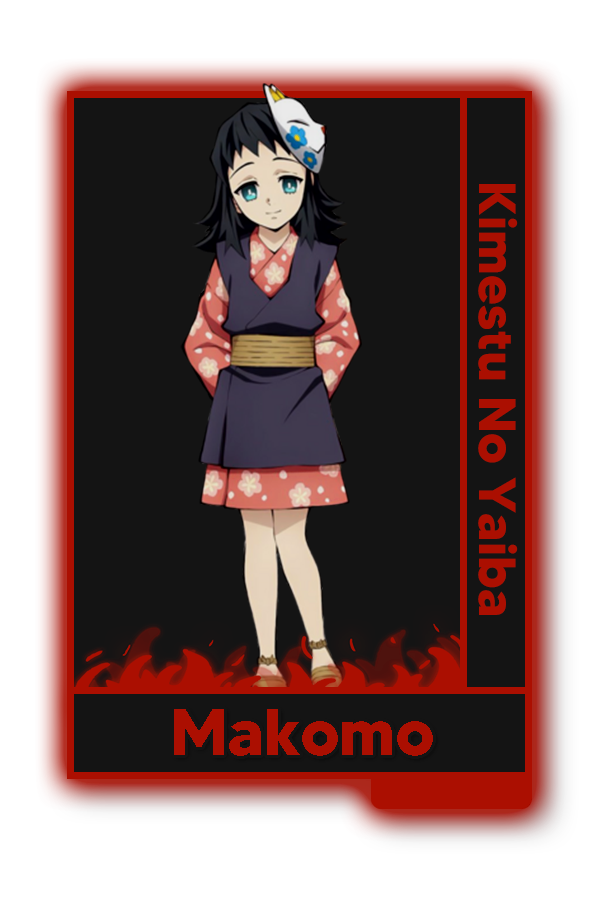
<style>
.page{position:relative;width:600px;height:900px;background:#141414}
.page>*{position:absolute;margin:0}
.t1{font:52px "MADETOMMY-Bold";color:#ab0f01}
.t2{font:65.2px "MADETOMMY-Bold";color:#ab0f01}
</style>
<div class="page">
<p class="t1" style="left:478px;top:184px;width:40px;height:431px;rotate:90deg">Kimestu No Yaiba</p>
<p class="t2" style="left:174px;top:709px;width:259px;height:47px">Makomo</p>
</div>
